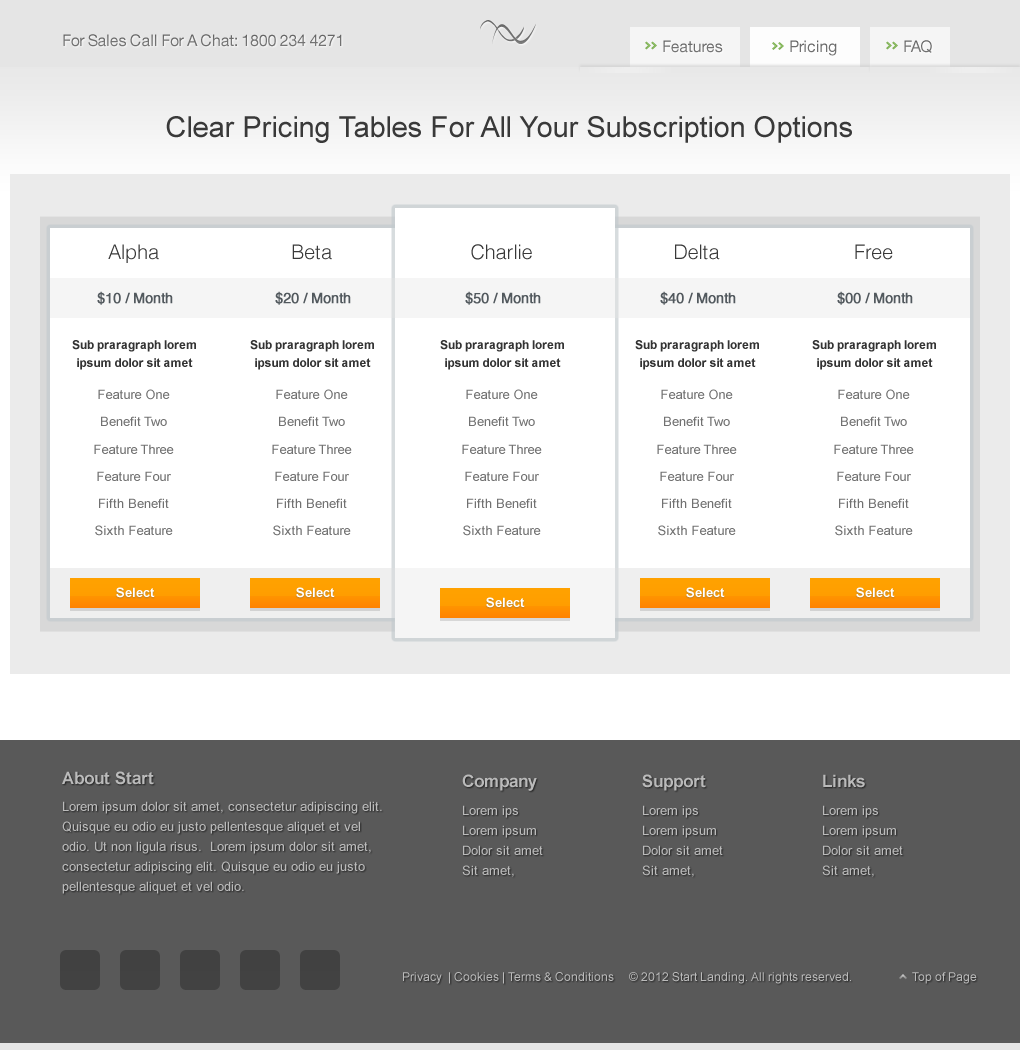
<style>
.page{position:relative;width:1020px;height:1050px;background:#ffffff}
.page>*{position:absolute;margin:0}
.t1{font:16px "HelveticaNeue-Roman";letter-spacing:-0.02em;color:#717171}
.t2{font:16px "HelveticaNeue-Roman";letter-spacing:-0.02em;color:#737373}
.t3{font:16px "HelveticaNeue-Roman";letter-spacing:-0.02em;color:#707070}
.t4{font:29px "ArialMT";color:#393939}
.t5{font:20px "Helvetica-Light";color:#393939}
.t6{font:14px "Helvetica";color:#52595e;font-weight:bold}
.t7{font:12px/18.5px "Arial-BoldMT";color:#333333}
.t8{font:13px/27.2px "ArialMT";color:#717171}
.t9{font:13px "Arial-BoldMT";color:#fefefe}
.t10{font:17px "Arial-BoldMT";color:#bbbbbb}
.t11{font:17px "Arial-BoldMT";color:#bababa}
.t12{font:13px/20px "ArialMT";color:#bbbbbb}
.t13{font:13px "ArialMT";color:#bbbbbb}
.t14{font:12px "ArialMT";color:#bbbbbb}
</style>
<div class="page">
<p class="t1" style="left:63px;top:34px;width:279px;height:13px">For Sales Call For A Chat: 1800 234 4271</p>
<p class="t2" style="left:663px;top:40px;width:60px;height:13px">Features</p>
<p class="t3" style="left:790px;top:40px;width:47px;height:16px">Pricing</p>
<p class="t1" style="left:904px;top:40px;width:28px;height:13px">FAQ</p>
<p class="t4" style="left:166px;top:116px;width:686px;height:27px">Clear Pricing Tables For All Your Subscription Options</p>
<p class="t5" style="left:108px;top:244px;width:51px;height:19px">Alpha</p>
<p class="t5" style="left:292px;top:244px;width:40px;height:16px">Beta</p>
<p class="t5" style="left:471px;top:244px;width:61px;height:16px">Charlie</p>
<p class="t5" style="left:675px;top:244px;width:45px;height:16px">Delta</p>
<p class="t5" style="left:855px;top:244px;width:38px;height:16px">Free</p>
<p class="t6" style="left:97px;top:291px;width:76px;height:14px">$10 / Month</p>
<p class="t6" style="left:275px;top:291px;width:76px;height:14px">$20 / Month</p>
<p class="t6" style="left:465px;top:291px;width:76px;height:14px">$50 / Month</p>
<p class="t6" style="left:660px;top:291px;width:76px;height:14px">$40 / Month</p>
<p class="t6" style="left:837px;top:291px;width:76px;height:14px">$00 / Month</p>
<p class="t7" style="left:72px;top:340px;width:124px;height:30px;text-align:center">Sub praragraph lorem ipsum dolor sit amet</p>
<p class="t7" style="left:250px;top:340px;width:124px;height:30px;text-align:center">Sub praragraph lorem ipsum dolor sit amet</p>
<p class="t7" style="left:440px;top:340px;width:124px;height:30px;text-align:center">Sub praragraph lorem ipsum dolor sit amet</p>
<p class="t7" style="left:635px;top:340px;width:124px;height:30px;text-align:center">Sub praragraph lorem ipsum dolor sit amet</p>
<p class="t7" style="left:812px;top:340px;width:124px;height:30px;text-align:center">Sub praragraph lorem ipsum dolor sit amet</p>
<p class="t8" style="left:94px;top:389px;width:80px;height:147px;text-align:center">Feature One<br>Benefit Two<br>Feature Three<br>Feature Four<br>Fifth Benefit<br>Sixth Feature</p>
<p class="t8" style="left:272px;top:389px;width:80px;height:147px;text-align:center">Feature One<br>Benefit Two<br>Feature Three<br>Feature Four<br>Fifth Benefit<br>Sixth Feature</p>
<p class="t8" style="left:462px;top:389px;width:80px;height:147px;text-align:center">Feature One<br>Benefit Two<br>Feature Three<br>Feature Four<br>Fifth Benefit<br>Sixth Feature</p>
<p class="t8" style="left:657px;top:389px;width:80px;height:147px;text-align:center">Feature One<br>Benefit Two<br>Feature Three<br>Feature Four<br>Fifth Benefit<br>Sixth Feature</p>
<p class="t8" style="left:834px;top:389px;width:80px;height:147px;text-align:center">Feature One<br>Benefit Two<br>Feature Three<br>Feature Four<br>Fifth Benefit<br>Sixth Feature</p>
<p class="t9" style="left:116px;top:587px;width:39px;height:11px">Select</p>
<p class="t9" style="left:296px;top:587px;width:39px;height:11px">Select</p>
<p class="t9" style="left:686px;top:587px;width:39px;height:11px">Select</p>
<p class="t9" style="left:856px;top:587px;width:39px;height:11px">Select</p>
<p class="t9" style="left:486px;top:597px;width:39px;height:11px">Select</p>
<p class="t10" style="left:62px;top:771px;width:92px;height:14px">About Start</p>
<p class="t11" style="left:462px;top:774px;width:75px;height:17px">Company</p>
<p class="t11" style="left:642px;top:774px;width:64px;height:17px">Support</p>
<p class="t11" style="left:823px;top:774px;width:42px;height:14px">Links</p>
<p class="t12" style="left:62px;top:801px;width:320px;height:93px">Lorem ipsum dolor sit amet, consectetur adipiscing elit. Quisque eu odio eu justo pellentesque aliquet et vel odio. Ut non ligula risus.  Lorem ipsum dolor sit amet, consectetur adipiscing elit. Quisque eu odio eu justo pellentesque aliquet et vel odio.</p>
<p class="t13" style="left:463px;top:805px;width:55px;height:13px">Lorem ips</p>
<p class="t13" style="left:643px;top:805px;width:55px;height:13px">Lorem ips</p>
<p class="t13" style="left:823px;top:805px;width:55px;height:13px">Lorem ips</p>
<p class="t13" style="left:463px;top:825px;width:73px;height:13px">Lorem ipsum</p>
<p class="t13" style="left:643px;top:825px;width:73px;height:13px">Lorem ipsum</p>
<p class="t13" style="left:823px;top:825px;width:73px;height:13px">Lorem ipsum</p>
<p class="t13" style="left:463px;top:845px;width:80px;height:10px">Dolor sit amet</p>
<p class="t13" style="left:643px;top:845px;width:80px;height:10px">Dolor sit amet</p>
<p class="t13" style="left:823px;top:845px;width:80px;height:10px">Dolor sit amet</p>
<p class="t13" style="left:462px;top:865px;width:52px;height:12px">Sit amet,</p>
<p class="t13" style="left:642px;top:865px;width:52px;height:12px">Sit amet,</p>
<p class="t13" style="left:822px;top:865px;width:52px;height:12px">Sit amet,</p>
<p class="t14" style="left:403px;top:972px;width:448px;height:12px">Privacy  | Cookies | Terms &amp; Conditions  © 2012 Start Landing. All rights reserved.</p>
<p class="t14" style="left:912px;top:972px;width:65px;height:12px">Top of Page</p>
</div>
